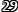
<style>
.page{position:relative;width:18px;height:12px;background:#ffffff}
.page>*{position:absolute;margin:0}
.t1{font:17px "Perpetua-Bold";color:#ffffff}
</style>
<div class="page">
<p class="t1" style="left:2px;top:1px;width:16px;height:10px;opacity:0.7">29</p>
</div>
